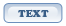
<style>
.page{position:relative;width:66px;height:26px;background:#ffffff}
.page>*{position:absolute;margin:0}
.t1{font:10px "CooperBlackStd";color:#385d86}
</style>
<div class="page">
<p class="t1" style="left:18px;top:9px;width:31px;height:8px">TEXT</p>
</div>
